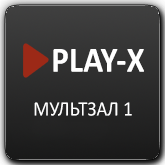
<style>
.page{position:relative;width:165px;height:165px}
.page>*{position:absolute;margin:0}
.t1{font:36px "Calibri-Bold";letter-spacing:0.005em;color:#ffffff;scale:0.92 1}
.t2{font:20.4px "Calibri";letter-spacing:0.005em;color:#ffffff;scale:0.92 1}
</style>
<div class="page">
<p class="t1" style="left:53px;top:49px;width:91px;height:23px">PLAY-X</p>
<p class="t2" style="left:34px;top:102px;width:98px;height:14px">МУЛЬТЗАЛ 1</p>
</div>
